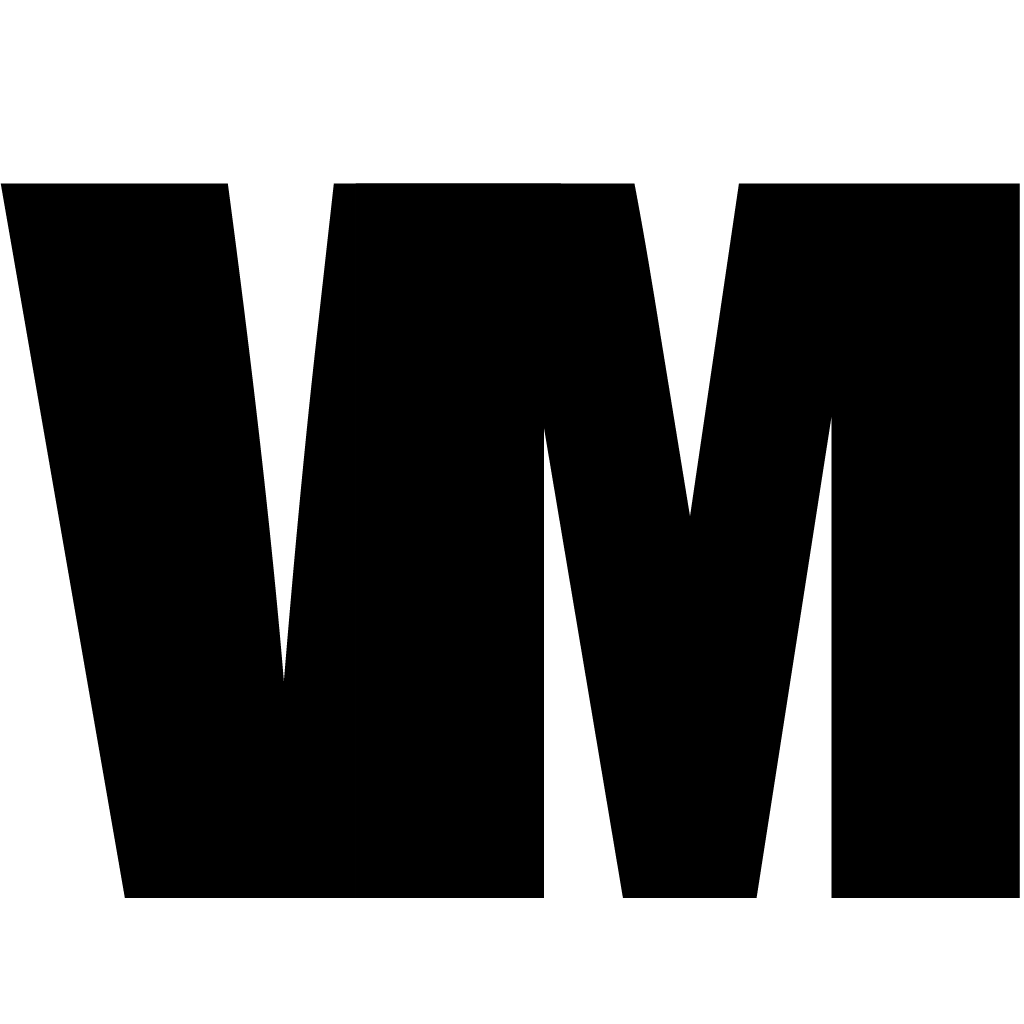
<style>
.page{position:relative;width:1024px;height:1024px;background:#000000}
.page>*{position:absolute;margin:0}
.t1{font:903.7px "Impact";color:#000000;scale:1.16 1}
</style>
<div class="page">
<p class="t1" style="left:0px;top:183px;width:561px;height:715px">V</p>
<p class="t1" style="left:355px;top:183px;width:665px;height:715px">M</p>
</div>
